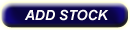
<style>
.page{position:relative;width:130px;height:30px}
.page>*{position:absolute;margin:0}
.t1{font:14px "Arial-BoldItalicMT";color:#fcfbf9}
</style>
<div class="page">
<p class="t1" style="left:24px;top:9px;width:85px;height:12px">ADD STOCK</p>
</div>
